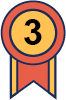
<style>
.page{position:relative;width:66px;height:100px;background:#ffffff}
.page>*{position:absolute;margin:0}
.t1{font:36px "Arial-BoldMT";color:#000000}
</style>
<div class="page">
<p class="t1" style="left:24px;top:19px;width:18px;height:26px">3</p>
</div>
